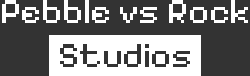
<style>
.page{position:relative;width:250px;height:76px;background:#333333}
.page>*{position:absolute;margin:0}
.t1{font:36px "PixelifySans-Regular";color:#ffffff}
</style>
<div class="page">
<p class="t1" style="left:2px;top:0px;width:246px;height:23px">Pebble vs Rock</p>
</div>
